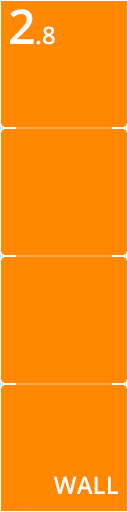
<style>
.page{position:relative;width:128px;height:512px;background:#ff8800}
.page>*{position:absolute;margin:0}
.t1{font:24px "OpenSans-Semibold";color:#ffffff}
.t2{font:48px "OpenSans-Semibold";color:#ffffff}
</style>
<div class="page">
<p class="t1" style="left:10px;top:9px;width:45px;height:36px"><span class="t2">2</span>.8</p>
<p class="t1" style="left:54px;top:476px;width:64px;height:18px">WALL</p>
</div>
